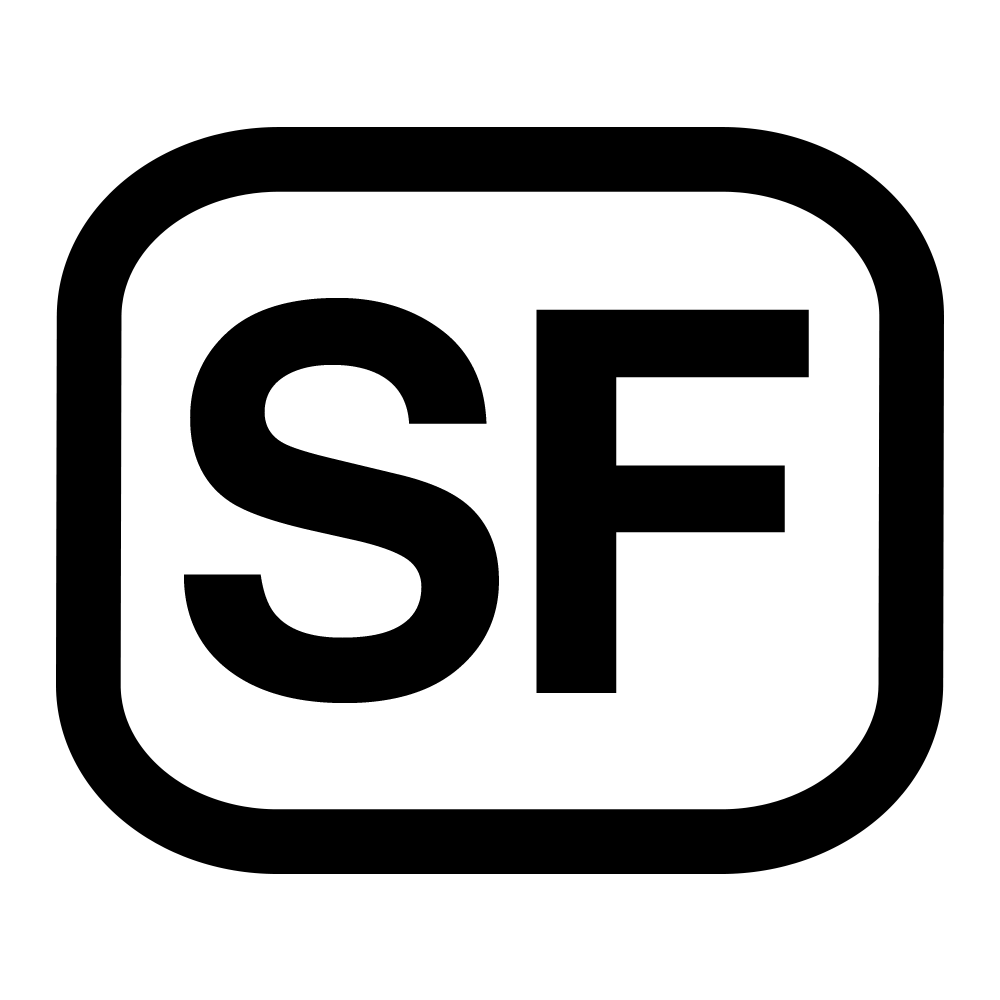
<style>
.page{position:relative;width:1000px;height:1000px;background:#ffffff}
.page>*{position:absolute;margin:0}
.t1{font:533.3px "Helvetica-Bold";letter-spacing:-0.04em;color:#000000}
</style>
<div class="page">
<p class="t1" style="left:184px;top:298px;width:625px;height:405px">SF</p>
</div>
